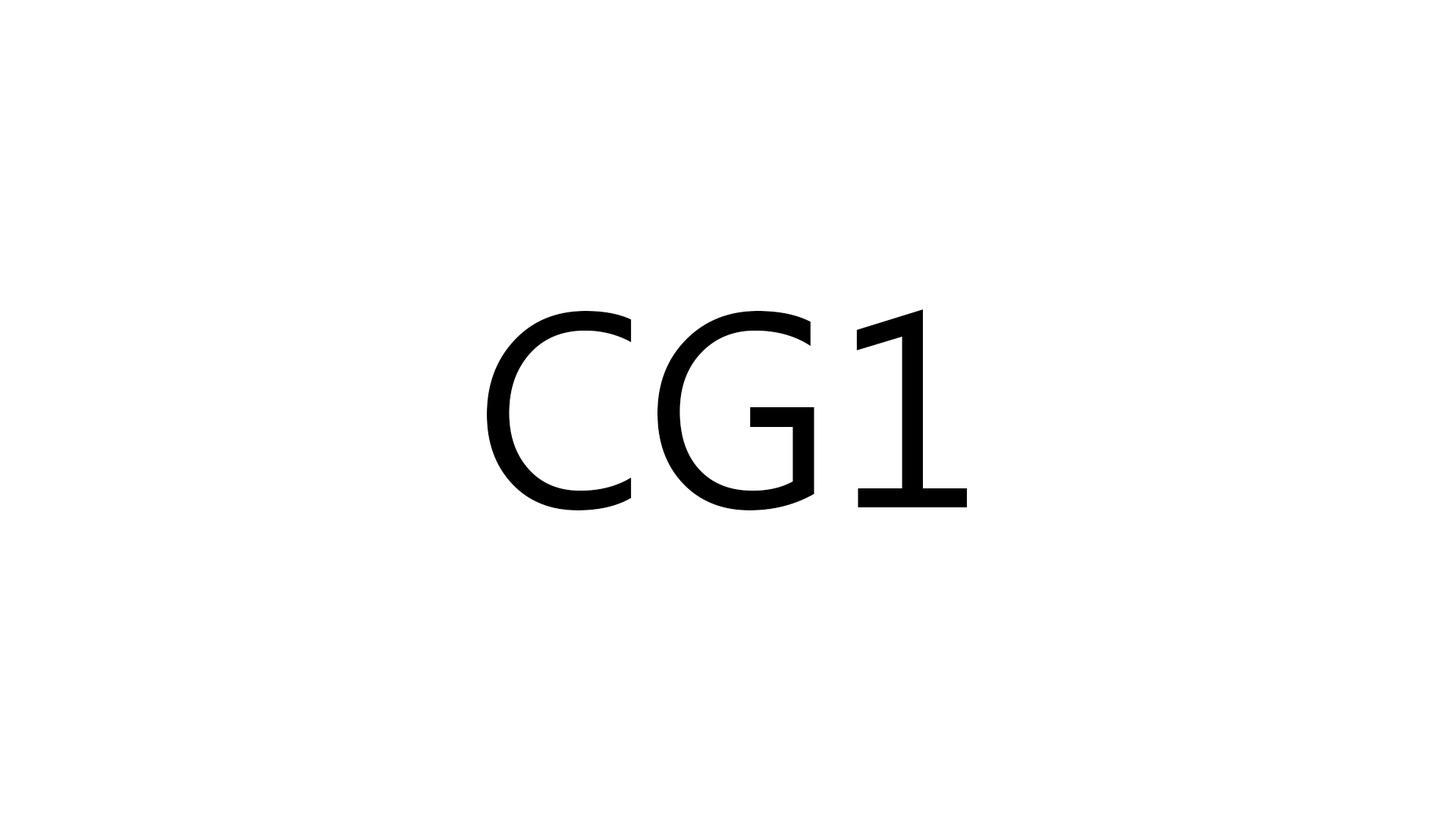
<style>
.page{position:relative;width:1456px;height:819px;background:#ffffff}
.page>*{position:absolute;margin:0}
.t1{font:256.2px "MicrosoftJhengHeiRegular";color:#000000}
</style>
<div class="page">
<p class="t1" style="left:486px;top:309px;width:481px;height:201px">CG1</p>
</div>
